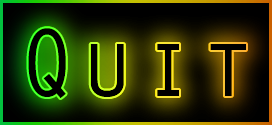
<style>
.page{position:relative;width:272px;height:125px}
.page>*{position:absolute;margin:0}
.t1{font:100px "OratorStd";color:#000000}
</style>
<div class="page">
<p class="t1" style="left:28px;top:28px;width:218px;height:70px">Quit</p>
</div>
